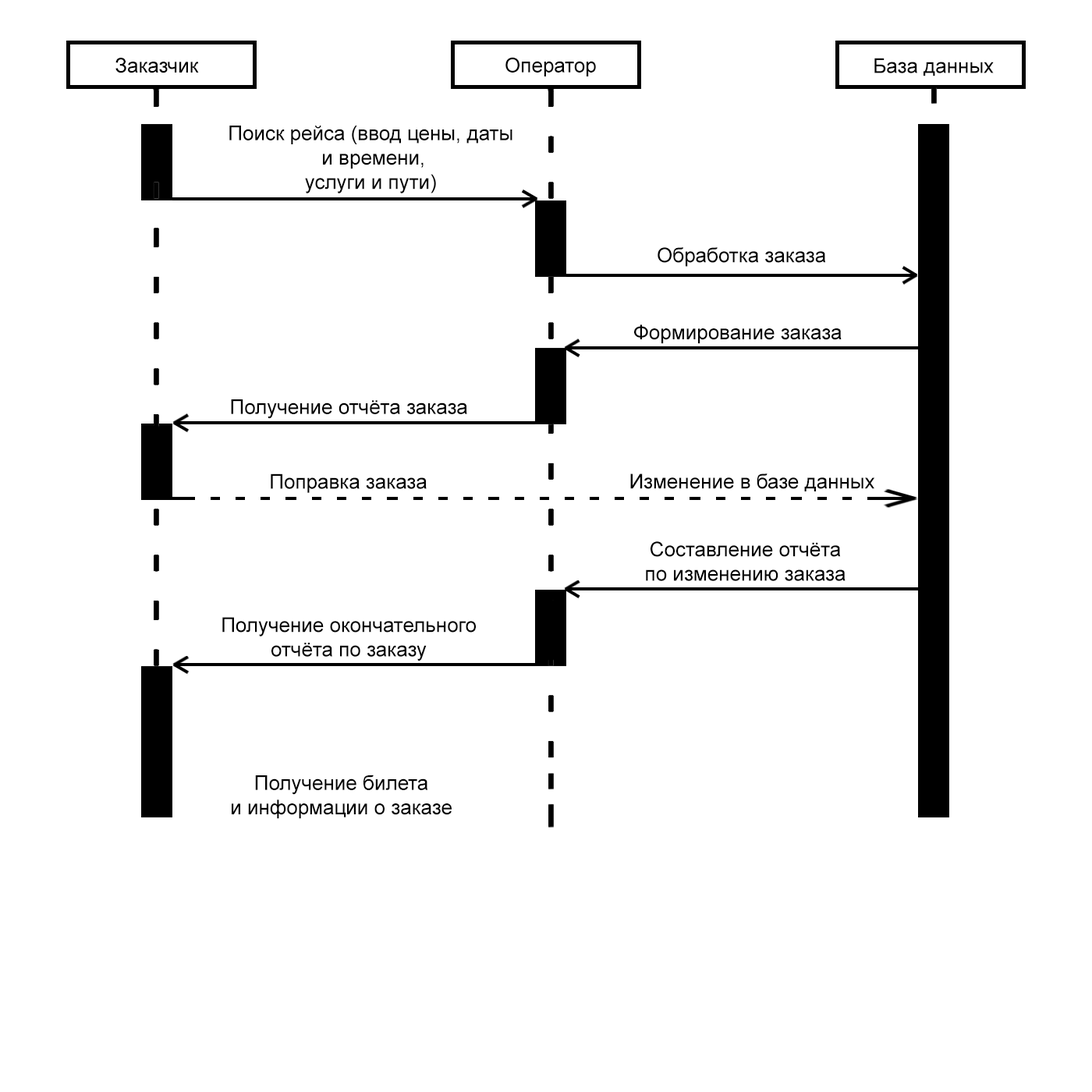
<style>
.page{position:relative;width:1092px;height:1092px;background:#ffffff}
.page>*{position:absolute;margin:0}
.t1{font:20.3px "ArialMT";color:#000000}
</style>
<div class="page">
<p class="t1" style="left:115px;top:58px;width:84px;height:15px">Заказчик</p>
<p class="t1" style="left:505px;top:57px;width:91px;height:19px">Оператор</p>
<p class="t1" style="left:874px;top:58px;width:120px;height:18px">База данных</p>
<p class="t1" style="left:229px;top:126px;width:283px;height:67px;text-align:center">Поиск рейса (ввод цены, даты<br> и времени,<br>услуги и пути)</p>
<p class="t1" style="left:658px;top:247px;width:168px;height:20px">Обработка заказа</p>
<p class="t1" style="left:634px;top:324px;width:208px;height:20px">Формирование заказа</p>
<p class="t1" style="left:231px;top:399px;width:236px;height:20px">Получение отчёта заказа</p>
<p class="t1" style="left:271px;top:473px;width:156px;height:20px">Поправка заказа</p>
<p class="t1" style="left:630px;top:473px;width:244px;height:18px">Изменение в базе данных</p>
<p class="t1" style="left:646px;top:541px;width:200px;height:40px;text-align:center">Составление отчёта<br>по изменению заказа</p>
<p class="t1" style="left:222px;top:617px;width:254px;height:44px;text-align:center">Получение окончательного<br>отчёта по заказу</p>
<p class="t1" style="left:232px;top:775px;width:220px;height:44px;text-align:center">Получение билета<br>и информации о заказе</p>
</div>
